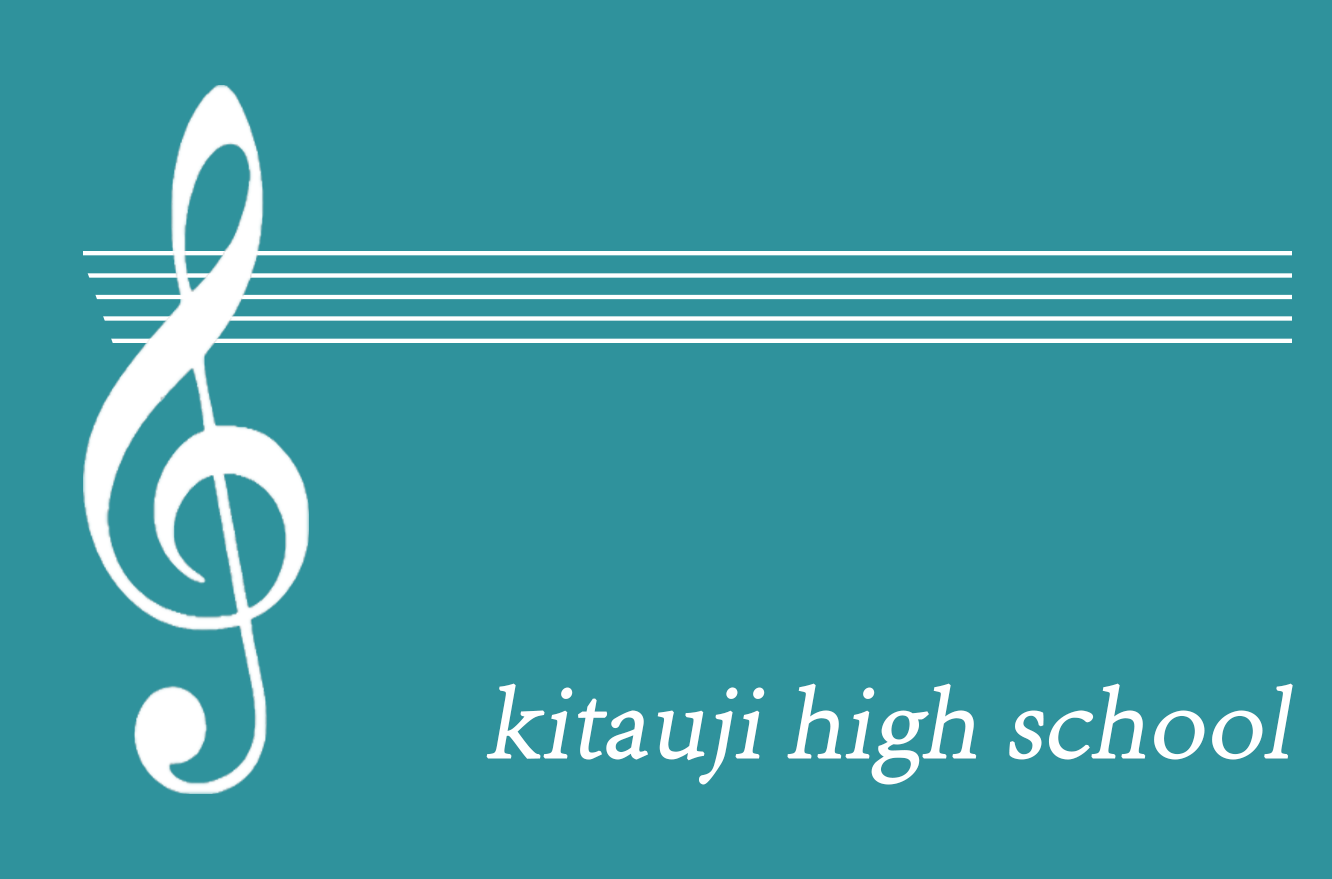
<style>
.page{position:relative;width:1332px;height:879px;background:#2f929c}
.page>*{position:absolute;margin:0}
.t1{font:105px "AdobeSongStd-Light";color:#ffffff;font-weight:bold;font-style:italic}
</style>
<div class="page">
<p class="t1" style="left:486px;top:683px;width:807px;height:102px">kitauji high school</p>
</div>
